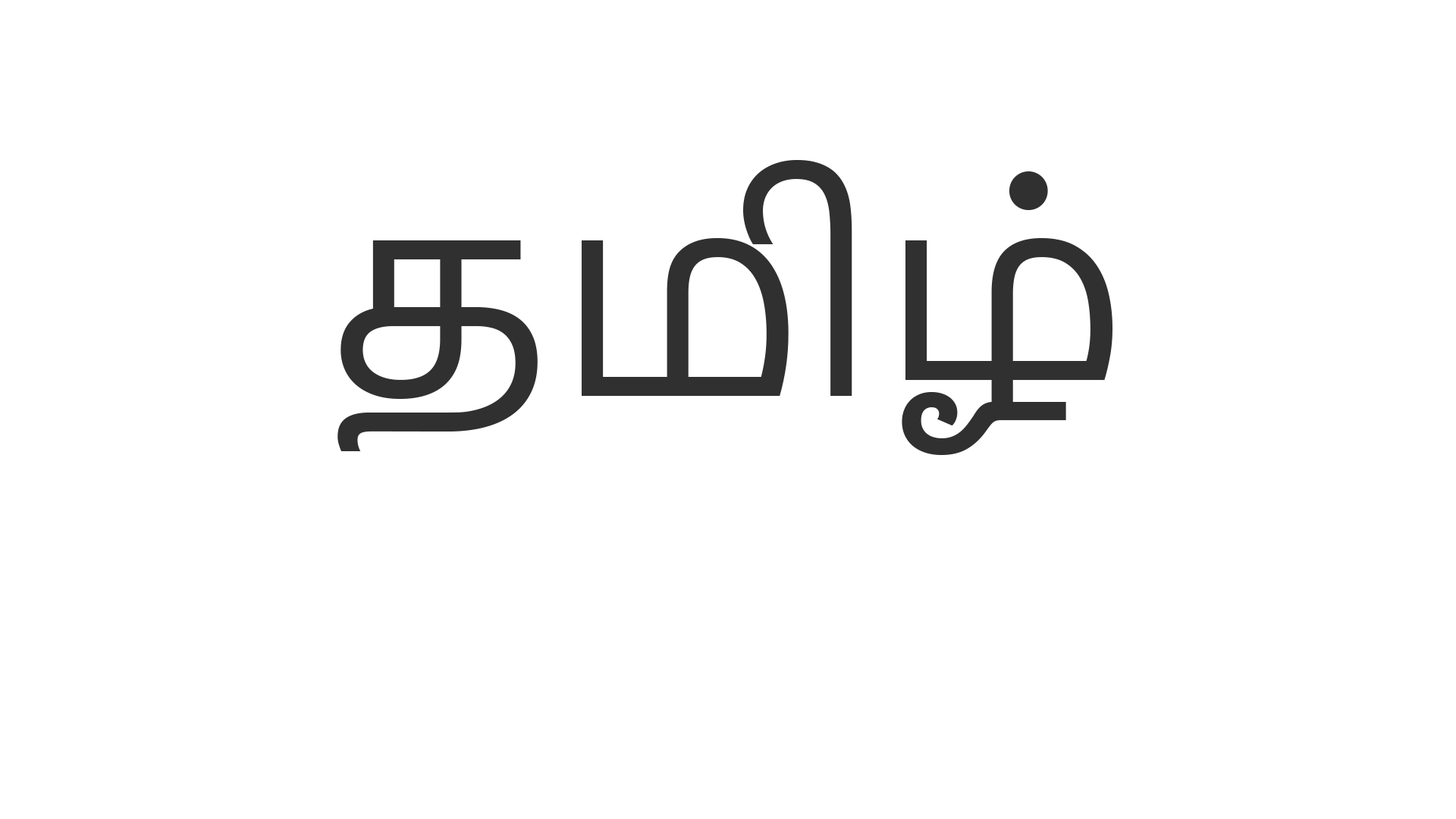
<style>
.page{position:relative;width:1456px;height:819px;background:#ffffff}
.page>*{position:absolute;margin:0}
.t1{font:265.4px "NirmalaUI";color:#303030}
</style>
<div class="page">
<p class="t1" style="left:337px;top:160px;width:775px;height:295px">தமிழ்</p>
</div>
